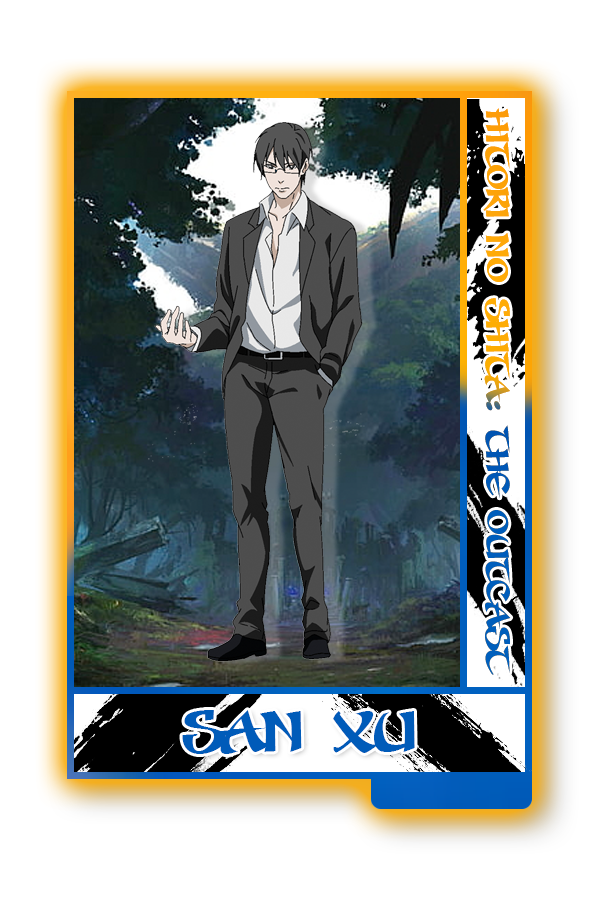
<style>
.page{position:relative;width:600px;height:900px;background:#ffffff}
.page>*{position:absolute;margin:0}
.t1{font:36.7px "SevenSwordsmenBB"}
.t2{font:64.5px "SevenSwordsmenBB";color:#005bb9}
</style>
<div class="page">
<p class="t1" style="left:483px;top:108px;width:28px;height:567px;rotate:90deg">HITORI NO SHITA: THE OUTCAST</p>
<p class="t2" style="left:182px;top:710px;width:233px;height:44px">SAN XU</p>
</div>
